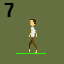
<style>
.page{position:relative;width:64px;height:64px;background:#64703f}
.page>*{position:absolute;margin:0}
.t1{font:18px "Krungthep";color:#000000}
</style>
<div class="page">
<p class="t1" style="left:4px;top:3px;width:10px;height:14px">7</p>
</div>
